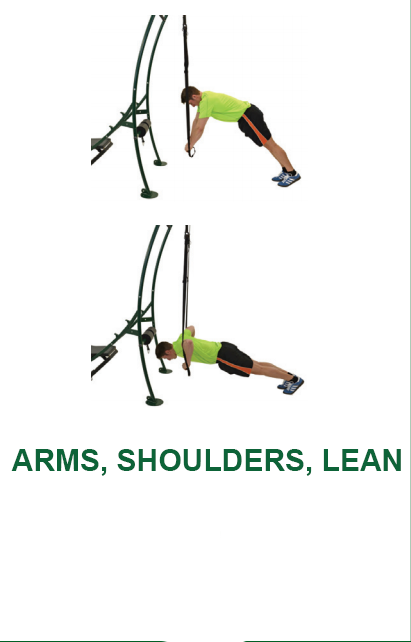
<style>
.page{position:relative;width:411px;height:642px;background:#ffffff}
.page>*{position:absolute;margin:0}
.t1{font:30px "Arial-BoldMT";color:#0d6338}
</style>
<div class="page">
<p class="t1" style="left:11px;top:449px;width:390px;height:27px">ARMS, SHOULDERS, LEAN</p>
</div>
